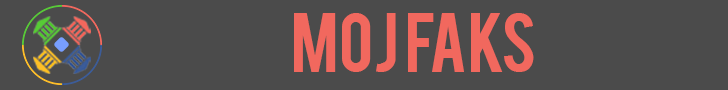
<style>
.page{position:relative;width:728px;height:90px;background:#4b4b4b}
.page>*{position:absolute;margin:0}
.t1{font:65.7px "Bebas";color:#f1685e}
</style>
<div class="page">
<p class="t1" style="left:294px;top:13px;width:240px;height:59px">MOJ FAKS</p>
</div>
